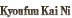
<style>
.page{position:relative;width:72px;height:18px;background:#ffffff}
.page>*{position:absolute;margin:0}
.t1{font:12px "RyuminPro-ExBold";letter-spacing:-0.08em;color:#4a3f32;font-weight:bold;scale:0.85 1}
</style>
<div class="page">
<p class="t1" style="left:0px;top:6px;width:71px;height:12px">Kyoufuu Kai Ni</p>
</div>
